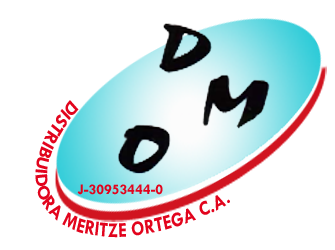
<style>
.page{position:relative;width:335px;height:250px;background:#ffffff}
.page>*{position:absolute;margin:0}
.t1{font:21.3px "TwCenMT-Bold";color:#e2041d;scale:0.86 1}
.t2{font:14.7px "TwCenMT-Bold";color:#e2041d}
</style>
<div class="page">
<p class="t1" style="left:35px;top:100px;width:195px;height:138px;text-align:center">DISTRIBUIDORA MERITZE ORTEGA C.A.</p>
<p class="t2" style="left:77px;top:184px;width:86px;height:11px">J-30953444-0</p>
</div>
